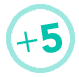
<style>
.page{position:relative;width:79px;height:77px;background:#ffffff}
.page>*{position:absolute;margin:0}
.t1{font:40px "Avenir-Black";color:#00c2ad}
.t2{font:40px "Avenir-Book";color:#00c2ad}
</style>
<div class="page">
<p class="t1" style="left:40px;top:22px;width:22px;height:31px;rotate:-10deg">5</p>
<p class="t2" style="left:16px;top:31px;width:22px;height:21px;rotate:-10deg">+</p>
</div>
